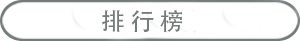
<style>
.page{position:relative;width:300px;height:41px;background:#ffffff}
.page>*{position:absolute;margin:0}
.t1{font:24px "AdobeHeitiStd-Regular";color:#757a7b}
</style>
<div class="page">
<p class="t1" style="left:102px;top:10px;width:80px;height:22px">排 行 榜</p>
</div>
